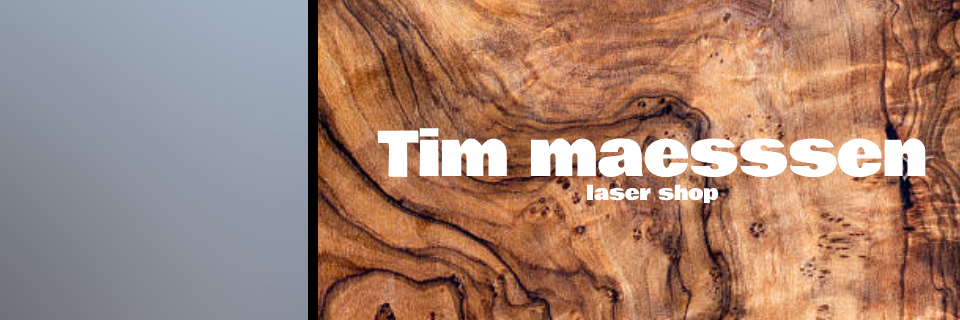
<style>
.page{position:relative;width:960px;height:320px}
.page>*{position:absolute;margin:0}
.t1{font:62px "BowlbyOne-Regular";color:#ffffff}
.t2{font:20px "BowlbyOne-Regular";color:#ffffff}
</style>
<div class="page">
<p class="t1" style="left:377px;top:127px;width:549px;height:77px;text-align:center">Tim maesssen<br><span class="t2">laser shop</span></p>
</div>
